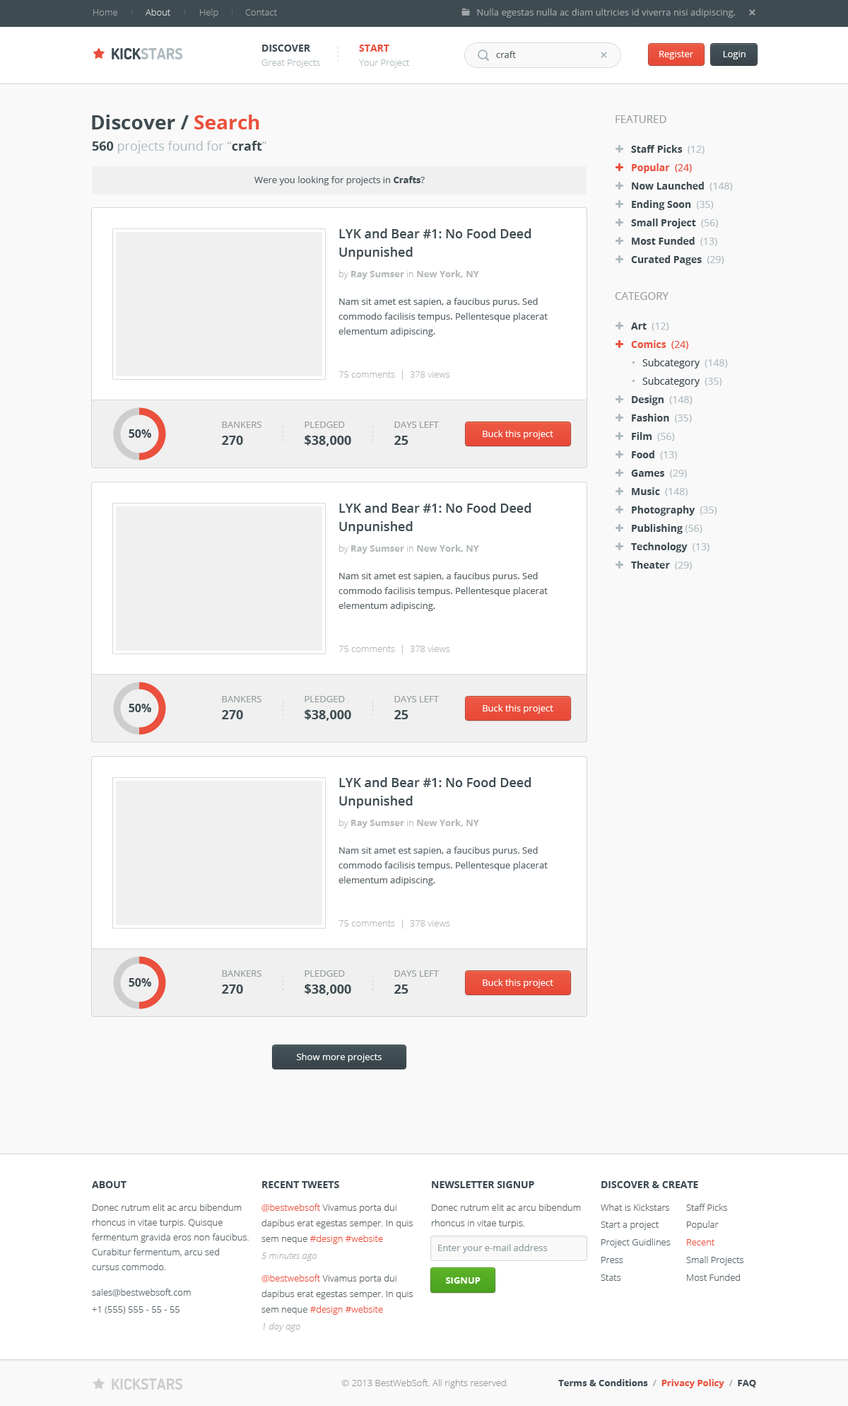
<style>
.page{position:relative;width:848px;height:1406px;background:#f9f9f9}
.page>*{position:absolute;margin:0}
.t1{font:9.2px "OpenSans-Light";color:#9fa5a8}
.t2{font:9.2px "OpenSans-Light";color:#d8dbdc}
.t3{font:9.2px "OpenSans";color:#9fa5a8}
.t4{font:15.6px "Dosis-Bold";color:#afbbc1;text-transform:uppercase}
.t5{font:15.6px "Dosis-Bold";color:#3e4b51;text-transform:uppercase}
.t6{font:9.9px "OpenSans-Bold";color:#3e4b51;text-transform:uppercase}
.t7{font:9.9px "OpenSans-Bold";color:#ea503d;text-transform:uppercase}
.t8{font:9.2px "OpenSans";color:#5c666b}
.t9{font:9.2px "OpenSans";color:#ffffff}
.t10{font:9.2px "OpenSans-Light";color:#afbbc1}
.t11{font:19.8px "OpenSans-Bold";color:#3e4b51}
.t12{font:19.8px "OpenSans-Bold";color:#ea503d}
.t13{font:10.6px "OpenSans";color:#979da0;text-transform:uppercase}
.t14{font:12.7px "OpenSans";color:#afbbc1}
.t15{font:12.7px "OpenSans-Bold";color:#3e4b51}
.t16{font:9.9px "OpenSans-Bold";color:#3e4b51}
.t17{font:9.9px "OpenSans";color:#afbbc1}
.t18{font:9.9px "OpenSans-Bold";color:#ea503d}
.t19{font:9.9px "OpenSans";color:#ea503d}
.t20{font:9.2px "OpenSans-Bold";color:#3e4b51}
.t21{font:12.7px/18.4px "OpenSans-Semibold";color:#3e4b51}
.t22{font:9.2px "OpenSans-Bold";color:#b2b7b9}
.t23{font:9.2px "OpenSans-Light";color:#b2b7b9}
.t24{font:9.2px/14.8px "OpenSans";color:#5c666b}
.t25{font:9.9px "OpenSans";color:#3e4b51}
.t26{font:9.2px "OpenSans";color:#979da0;text-transform:uppercase}
.t27{font:11.3px "OpenSans-Bold";color:#3e4b51}
.t28{font:9.9px "OpenSans-Bold";color:#3e4a51;text-transform:uppercase}
.t29{font:9.2px/14.8px "OpenSans-Light";color:#5c666b}
.t30{font:9.2px/15.6px "OpenSans-Light";color:#5c666b}
.t31{font:9.2px/15.6px "OpenSans-Light";color:#ea503d}
.t32{font:9.2px "OpenSans-Light";color:#5c666b}
.t33{font:9.2px "OpenSans-Light";color:#ea503d}
.t34{font:9.2px "OpenSansLight-Italic";color:#adb2b5}
.t35{font:9.2px "OpenSans";color:#909da3}
.t36{font:9.2px "OpenSans-Bold";color:#ffffff;text-transform:uppercase}
.t37{font:15.6px "Dosis-Bold";color:#cecece;text-transform:uppercase}
.t38{font:9.2px "OpenSans-Light";color:#999999}
.t39{font:9.2px "OpenSans-Bold";color:#3e4a51}
.t40{font:9.2px "OpenSans-Bold";color:#aeaeae}
.t41{font:9.2px "OpenSans-Bold";color:#ea503d}
</style>
<div class="page">
<p class="t1" style="left:93px;top:9px;width:24px;height:7px">Home</p>
<p class="t2" style="left:146px;top:8px;width:24px;height:8px">About</p>
<p class="t1" style="left:200px;top:8px;width:18px;height:10px">Help</p>
<p class="t1" style="left:245px;top:9px;width:32px;height:7px">Contact</p>
<p class="t3" style="left:477px;top:8px;width:259px;height:10px">Nulla egestas nulla ac diam ultricies id viverra nisi adipiscing.</p>
<p class="t4" style="left:112px;top:48px;width:71px;height:11px"><span class="t5">Kick</span>stars</p>
<p class="t6" style="left:262px;top:45px;width:48px;height:7px">Discover</p>
<p class="t7" style="left:359px;top:45px;width:31px;height:7px">Start</p>
<p class="t8" style="left:496px;top:51px;width:20px;height:7px">craft</p>
<p class="t9" style="left:660px;top:51px;width:34px;height:8px">Register</p>
<p class="t9" style="left:723px;top:51px;width:23px;height:8px">Login</p>
<p class="t10" style="left:262px;top:59px;width:58px;height:9px">Great Projects</p>
<p class="t10" style="left:359px;top:59px;width:51px;height:9px">Your Project</p>
<p class="t11" style="left:92px;top:115px;width:167px;height:14px">Discover / <span class="t12">Search</span></p>
<p class="t13" style="left:616px;top:115px;width:51px;height:8px">Featured</p>
<p class="t14" style="left:92px;top:141px;width:175px;height:12px"><span class="t15">560</span> projects found for “<span class="t15">craft</span>”</p>
<p class="t16" style="left:631px;top:145px;width:74px;height:9px">Staff Picks <span class="t17"> (12)</span></p>
<p class="t18" style="left:632px;top:163px;width:60px;height:10px">Popular <span class="t19"> (24)</span></p>
<p class="t8" style="left:255px;top:176px;width:170px;height:9px">Were you looking for projects in <span class="t20">Crafts</span>?</p>
<p class="t16" style="left:632px;top:182px;width:101px;height:9px">Now Launched <span class="t17"> (148)</span></p>
<p class="t16" style="left:632px;top:200px;width:82px;height:10px">Ending Soon <span class="t17"> (35)</span></p>
<p class="t16" style="left:631px;top:218px;width:87px;height:10px">Small Project <span class="t17"> (56)</span></p>
<p class="t21" style="left:339px;top:228px;width:193px;height:31px">LYK and Bear #1: No Food Deed<br>Unpunished</p>
<p class="t16" style="left:632px;top:237px;width:86px;height:9px">Most Funded <span class="t17"> (13)</span></p>
<p class="t16" style="left:631px;top:255px;width:94px;height:10px">Curated Pages <span class="t17"> (29)</span></p>
<p class="t22" style="left:339px;top:270px;width:140px;height:9px"><span class="t23">by </span>Ray Sumser<span class="t23"> in </span>New York, NY</p>
<p class="t13" style="left:615px;top:292px;width:54px;height:8px">Category</p>
<p class="t24" style="left:339px;top:298px;width:209px;height:39px">Nam sit amet est sapien, a faucibus purus. Sed commodo facilisis tempus. Pellentesque placerat elementum adipiscing.</p>
<p class="t17" style="left:631px;top:322px;width:39px;height:9px"><span class="t16">Art </span> (12)</p>
<p class="t18" style="left:631px;top:340px;width:58px;height:9px">Comics <span class="t19"> (24)</span></p>
<p class="t25" style="left:643px;top:358px;width:85px;height:10px">Subcategory <span class="t17"> (148)</span></p>
<p class="t23" style="left:339px;top:370px;width:111px;height:10px">75 comments  |  378 views</p>
<p class="t25" style="left:643px;top:377px;width:80px;height:10px">Subcategory <span class="t17"> (35)</span></p>
<p class="t16" style="left:632px;top:395px;width:61px;height:10px">Design <span class="t17"> (148)</span></p>
<p class="t16" style="left:632px;top:414px;width:60px;height:9px">Fashion <span class="t17"> (35)</span></p>
<p class="t26" style="left:222px;top:421px;width:40px;height:7px">Bankers</p>
<p class="t26" style="left:305px;top:421px;width:40px;height:7px">Pledged</p>
<p class="t26" style="left:395px;top:421px;width:44px;height:7px">Days Left</p>
<p class="t27" style="left:129px;top:429px;width:22px;height:9px">50%</p>
<p class="t15" style="left:222px;top:436px;width:21px;height:9px">270</p>
<p class="t15" style="left:305px;top:435px;width:46px;height:11px">$38,000</p>
<p class="t15" style="left:395px;top:436px;width:14px;height:9px">25</p>
<p class="t9" style="left:483px;top:430px;width:71px;height:9px">Buck this project</p>
<p class="t16" style="left:632px;top:432px;width:43px;height:9px">Film <span class="t17"> (56)</span></p>
<p class="t16" style="left:632px;top:450px;width:45px;height:10px">Food <span class="t17"> (13)</span></p>
<p class="t16" style="left:631px;top:469px;width:56px;height:9px">Games <span class="t17"> (29)</span></p>
<p class="t16" style="left:632px;top:487px;width:56px;height:9px">Music <span class="t17"> (148)</span></p>
<p class="t21" style="left:339px;top:503px;width:193px;height:31px">LYK and Bear #1: No Food Deed<br>Unpunished</p>
<p class="t16" style="left:632px;top:506px;width:86px;height:9px">Photography <span class="t17"> (35)</span></p>
<p class="t16" style="left:632px;top:524px;width:71px;height:10px">Publishing<span class="t17"> (56)</span></p>
<p class="t22" style="left:339px;top:544px;width:140px;height:10px"><span class="t23">by </span>Ray Sumser<span class="t23"> in </span>New York, NY</p>
<p class="t16" style="left:631px;top:542px;width:79px;height:10px">Technology <span class="t17"> (13)</span></p>
<p class="t16" style="left:631px;top:561px;width:61px;height:9px">Theater <span class="t17"> (29)</span></p>
<p class="t24" style="left:339px;top:572px;width:209px;height:39px">Nam sit amet est sapien, a faucibus purus. Sed commodo facilisis tempus. Pellentesque placerat elementum adipiscing.</p>
<p class="t23" style="left:339px;top:645px;width:111px;height:9px">75 comments  |  378 views</p>
<p class="t26" style="left:222px;top:696px;width:40px;height:6px">Bankers</p>
<p class="t26" style="left:305px;top:696px;width:40px;height:6px">Pledged</p>
<p class="t26" style="left:395px;top:696px;width:44px;height:6px">Days Left</p>
<p class="t27" style="left:129px;top:703px;width:22px;height:9px">50%</p>
<p class="t15" style="left:222px;top:710px;width:21px;height:9px">270</p>
<p class="t15" style="left:305px;top:709px;width:46px;height:11px">$38,000</p>
<p class="t15" style="left:395px;top:710px;width:14px;height:9px">25</p>
<p class="t9" style="left:483px;top:704px;width:71px;height:9px">Buck this project</p>
<p class="t21" style="left:339px;top:777px;width:193px;height:31px">LYK and Bear #1: No Food Deed<br>Unpunished</p>
<p class="t22" style="left:339px;top:819px;width:140px;height:9px"><span class="t23">by </span>Ray Sumser<span class="t23"> in </span>New York, NY</p>
<p class="t24" style="left:339px;top:846px;width:209px;height:39px">Nam sit amet est sapien, a faucibus purus. Sed commodo facilisis tempus. Pellentesque placerat elementum adipiscing.</p>
<p class="t23" style="left:339px;top:919px;width:111px;height:9px">75 comments  |  378 views</p>
<p class="t27" style="left:129px;top:978px;width:22px;height:8px">50%</p>
<p class="t26" style="left:222px;top:970px;width:40px;height:6px">Bankers</p>
<p class="t26" style="left:305px;top:970px;width:40px;height:6px">Pledged</p>
<p class="t26" style="left:395px;top:970px;width:44px;height:6px">Days Left</p>
<p class="t15" style="left:222px;top:984px;width:21px;height:9px">270</p>
<p class="t15" style="left:305px;top:983px;width:46px;height:12px">$38,000</p>
<p class="t15" style="left:395px;top:984px;width:14px;height:9px">25</p>
<p class="t9" style="left:483px;top:978px;width:71px;height:10px">Buck this project</p>
<p class="t9" style="left:297px;top:1053px;width:85px;height:9px">Show more projects</p>
<p class="t28" style="left:92px;top:1181px;width:35px;height:7px">About</p>
<p class="t28" style="left:262px;top:1181px;width:77px;height:7px">Recent Tweets</p>
<p class="t28" style="left:432px;top:1181px;width:102px;height:7px">Newsletter Signup</p>
<p class="t28" style="left:602px;top:1181px;width:97px;height:7px">Discover &amp; Create</p>
<p class="t29" style="left:92px;top:1203px;width:157px;height:67px">Donec rutrum elit ac arcu bibendum rhoncus in vitae turpis. Quisque fermentum gravida eros non faucibus. Curabitur fermentum, arcu sed cursus commodo.</p>
<p class="t30" style="left:262px;top:1203px;width:151px;height:41px"><span class="t31">@bestwebsoft</span> Vivamus porta dui dapibus erat egestas semper. In quis sem neque <span class="t31">#design #website</span></p>
<p class="t30" style="left:432px;top:1203px;width:149px;height:25px">Donec rutrum elit ac arcu bibendum rhoncus in vitae turpis.</p>
<p class="t32" style="left:601px;top:1203px;width:69px;height:7px">What is Kickstars</p>
<p class="t32" style="left:686px;top:1203px;width:42px;height:7px">Staff Picks</p>
<p class="t32" style="left:601px;top:1221px;width:59px;height:8px">Start a project</p>
<p class="t32" style="left:687px;top:1220px;width:32px;height:9px">Popular</p>
<p class="t32" style="left:602px;top:1238px;width:69px;height:9px">Project Guidlines</p>
<p class="t33" style="left:687px;top:1239px;width:28px;height:6px">Recent</p>
<p class="t34" style="left:262px;top:1251px;width:55px;height:10px">5 minutes ago</p>
<p class="t35" style="left:438px;top:1244px;width:110px;height:9px">Enter your e-mail address</p>
<p class="t32" style="left:602px;top:1256px;width:22px;height:7px">Press</p>
<p class="t32" style="left:686px;top:1256px;width:58px;height:9px">Small Projects</p>
<p class="t30" style="left:262px;top:1274px;width:151px;height:40px"><span class="t31">@bestwebsoft </span>Vivamus porta dui dapibus erat egestas semper. In quis sem neque <span class="t31">#design #website</span></p>
<p class="t36" style="left:446px;top:1277px;width:35px;height:6px">Signup</p>
<p class="t32" style="left:601px;top:1274px;width:20px;height:6px">Stats</p>
<p class="t32" style="left:687px;top:1273px;width:53px;height:7px">Most Funded</p>
<p class="t32" style="left:92px;top:1288px;width:99px;height:8px">sales@bestwebsoft.com</p>
<p class="t32" style="left:92px;top:1306px;width:88px;height:8px">+1 (555) 555 - 55 - 55</p>
<p class="t34" style="left:263px;top:1322px;width:37px;height:9px">1 day ago</p>
<p class="t37" style="left:112px;top:1378px;width:71px;height:11px">Kickstars</p>
<p class="t38" style="left:341px;top:1379px;width:167px;height:9px">© 2013 BestWebSoft. All rights reserved.</p>
<p class="t39" style="left:559px;top:1379px;width:197px;height:9px">Terms &amp; Conditions <span class="t40"> /  </span><span class="t41">Privacy Policy  </span><span class="t40">/  </span>FAQ</p>
</div>
